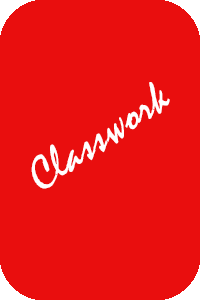
<style>
.page{position:relative;width:200px;height:300px;background:#e90e0e}
.page>*{position:absolute;margin:0}
.t1{font:48px "Mistral";color:#ffffff}
</style>
<div class="page">
<p class="t1" style="left:31px;top:82px;width:139px;height:107px;rotate:-34deg">Classwork</p>
</div>
